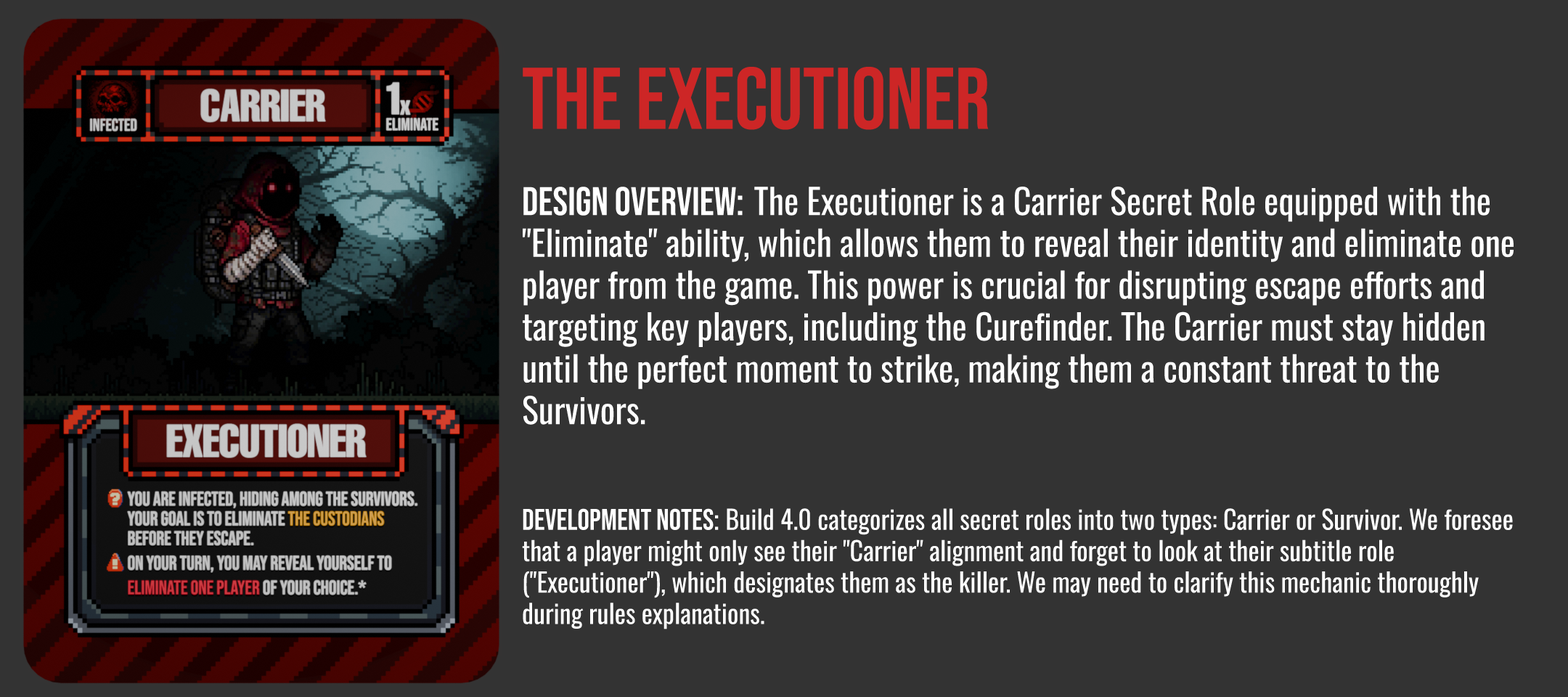
<style>
.page{position:relative;width:1568px;height:697px;background:#333333}
.page>*{position:absolute;margin:0}
.t1{font:87.1px "BebasNeue-Regular";color:#cd2626}
.t2{font:34.8px "Oswald-Regular";color:#ffffff}
.t3{font:39.9px "BebasNeue-Regular";color:#ffffff}
.t4{font:26.1px "Oswald-Regular";color:#ffffff}
.t5{font:29.8px "BebasNeue-Regular";color:#ffffff}
</style>
<div class="page">
<p class="t1" style="left:523px;top:67px;width:466px;height:63px">THE EXECUTIONER</p>
<p class="t2" style="left:523px;top:187px;width:991px;height:238px"><span class="t3">Design Overview: </span>The Executioner is a Carrier Secret Role equipped with the "Eliminate" ability, which allows them to reveal their identity and eliminate one player from the game. This power is crucial for disrupting escape efforts and targeting key players, including the Curefinder. The Carrier must stay hidden until the perfect moment to strike, making them a constant threat to the Survivors.</p>
<p class="t4" style="left:522px;top:508px;width:991px;height:121px"><span class="t5">development Notes:</span> Build 4.0 categorizes all secret roles into two types: Carrier or Survivor. We foresee that a player might only see their "Carrier" alignment and forget to look at their subtitle role ("Executioner"), which designates them as the killer. We may need to clarify this mechanic thoroughly during rules explanations.</p>
</div>
